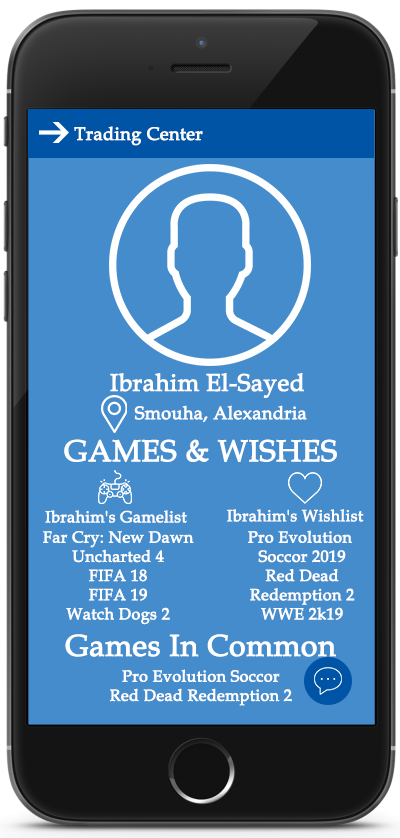
<style>
.page{position:relative;width:400px;height:838px;background:#448ccb}
.page>*{position:absolute;margin:0}
.t1{font:18px "BookAntiqua";color:#ffffff;font-weight:bold}
.t2{font:24px "BookAntiqua";color:#ffffff;font-weight:bold}
.t3{font:30px "BookAntiqua";color:#ffffff;font-weight:bold}
.t4{font:16px "BookAntiqua";color:#ffffff;font-weight:bold}
</style>
<div class="page">
<p class="t1" style="left:74px;top:126px;width:129px;height:20px">Trading Center</p>
<p class="t2" style="left:110px;top:373px;width:194px;height:25px">Ibrahim El-Sayed</p>
<p class="t1" style="left:134px;top:405px;width:173px;height:18px">Smouha, Alexandria</p>
<p class="t3" style="left:64px;top:439px;width:273px;height:23px">GAMES &amp; WISHES</p>
<p class="t4" style="left:45px;top:510px;width:142px;height:13px">Ibrahim's Gamelist</p>
<p class="t4" style="left:227px;top:509px;width:137px;height:13px">Ibrahim's Wishlist</p>
<p class="t4" style="left:43px;top:531px;width:151px;height:94px;text-align:center">Far Cry: New Dawn<br>Uncharted 4<br>FIFA 18<br>FIFA 19<br>Watch Dogs 2</p>
<p class="t4" style="left:248px;top:530px;width:107px;height:90px;text-align:center">Pro Evolution <br>Soccor 2019<br>Red Dead<br>Redemption 2<br>WWE 2k19</p>
<p class="t3" style="left:65px;top:634px;width:271px;height:23px">Games In Common</p>
<p class="t4" style="left:110px;top:669px;width:182px;height:37px;text-align:center">Pro Evolution Soccor<br>Red Dead Redemption 2</p>
</div>
